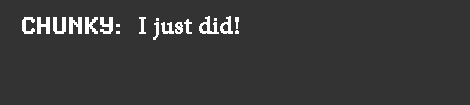
<style>
.page{position:relative;width:470px;height:105px;background:#333333}
.page>*{position:absolute;margin:0}
.t1{font:24px "MinionPro-Regular";color:#ffffff;font-weight:bold}
.t2{font:24px "SynchroLET";color:#ffffff;font-weight:bold}
</style>
<div class="page">
<p class="t1" style="left:22px;top:16px;width:217px;height:24px"><span class="t2">Chunky:  </span>I just did!</p>
</div>
